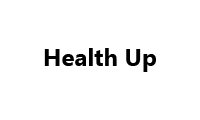
<style>
.page{position:relative;width:200px;height:120px;background:#ffffff}
.page>*{position:absolute;margin:0}
.t1{font:24px "MicrosoftTaiLe-Bold";color:#000000}
.t2{font:24px "MicrosoftTaiLe-Bold";color:#030202}
</style>
<div class="page">
<p class="t1" style="left:44px;top:48px;width:112px;height:24px">Health U<span class="t2">p</span></p>
</div>
